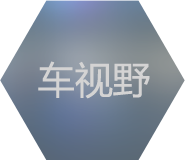
<style>
.page{position:relative;width:185px;height:160px;background:#ffffff}
.page>*{position:absolute;margin:0}
.t1{font:37.5px "MicrosoftYaHei";color:#d4d3d3}
</style>
<div class="page">
<p class="t1" style="left:38px;top:61px;width:112px;height:38px">车视野</p>
</div>
